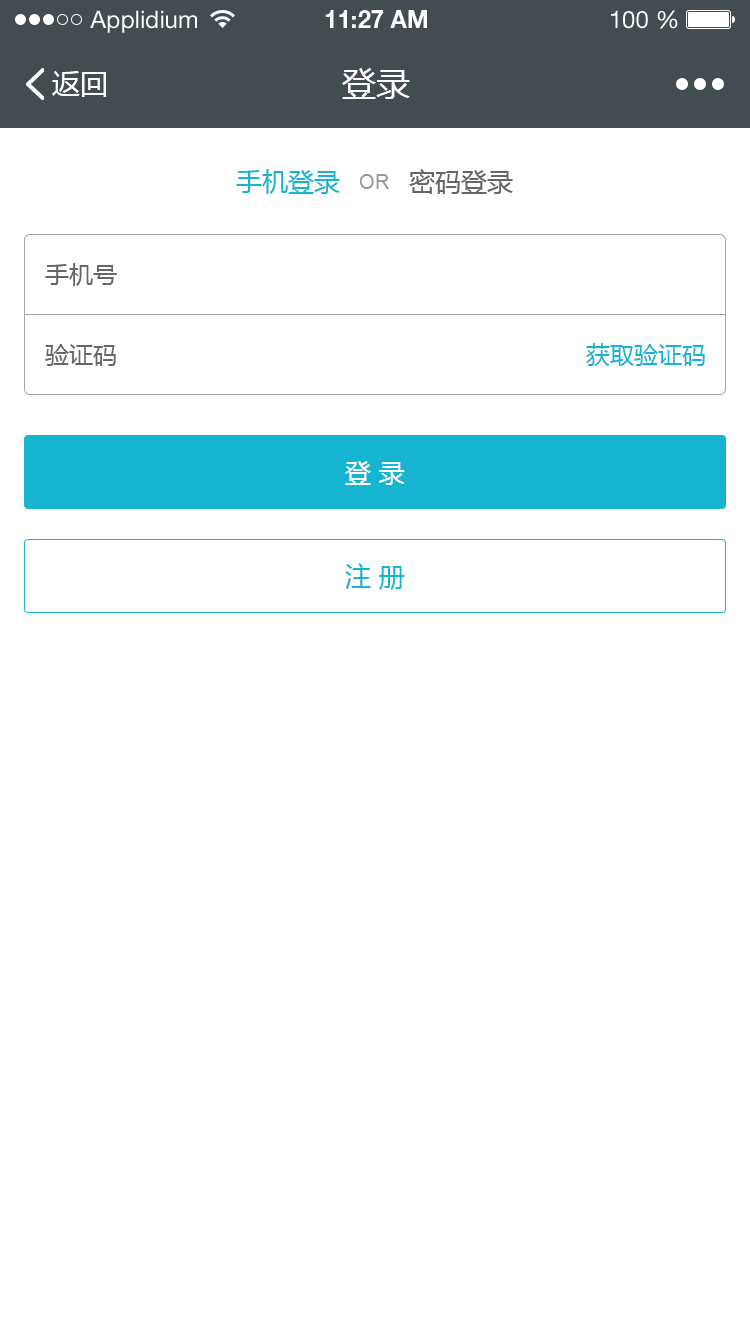
<style>
.page{position:relative;width:750px;height:1334px;background:#ffffff}
.page>*{position:absolute;margin:0}
.t1{font:24px "HelveticaNeueLTStd-Roman";color:#ffffff}
.t2{font:24px "HelveticaNeueLTStd-Bd";color:#ffffff}
.t3{font:28px "MicrosoftYaHei";color:#ffffff}
.t4{font:34px "MicrosoftYaHei";color:#ffffff}
.t5{font:26px "MicrosoftYaHei";color:#15b4d0}
.t6{font:20px "ArialMT";color:#999999}
.t7{font:26px "MicrosoftYaHei";color:#666666}
.t8{font:24px "MicrosoftYaHei";color:#666666}
.t9{font:24px "MicrosoftYaHei";color:#15b4d0}
.t10{font:26px "MicrosoftYaHei";letter-spacing:0.3em;color:#ffffff}
.t11{font:26px "MicrosoftYaHei";letter-spacing:0.3em;color:#15b4d0}
</style>
<div class="page">
<p class="t1" style="left:90px;top:10px;width:107px;height:23px">Applidium</p>
<p class="t2" style="left:325px;top:10px;width:102px;height:18px">11:27 AM</p>
<p class="t1" style="left:611px;top:10px;width:67px;height:19px">100 %</p>
<p class="t3" style="left:52px;top:71px;width:54px;height:26px">返回</p>
<p class="t4" style="left:342px;top:68px;width:68px;height:31px">登录</p>
<p class="t5" style="left:236px;top:169px;width:104px;height:25px">手机登录</p>
<p class="t6" style="left:360px;top:174px;width:29px;height:15px">OR</p>
<p class="t7" style="left:409px;top:169px;width:104px;height:25px">密码登录</p>
<p class="t8" style="left:45px;top:263px;width:72px;height:23px">手机号</p>
<p class="t8" style="left:45px;top:344px;width:71px;height:22px">验证码</p>
<p class="t9" style="left:586px;top:343px;width:119px;height:23px">获取验证码</p>
<p class="t10" style="left:345px;top:461px;width:60px;height:24px">登录</p>
<p class="t11" style="left:345px;top:563px;width:60px;height:27px">注册</p>
</div>
